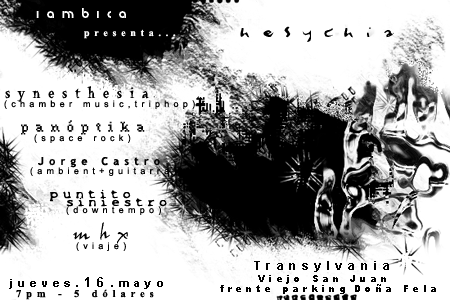
<style>
.page{position:relative;width:450px;height:300px;background:#ffffff}
.page>*{position:absolute;margin:0}
.t1{font:15px "BabyFace";letter-spacing:0.475em;color:#ffffff}
.t2{font:10px "TimesNewRomanPS-BoldMT";letter-spacing:0.475em;color:#ffffff}
.t3{font:24px "EnyaPlain";letter-spacing:0.475em;color:#010101}
.t4{font:16px "LaBambaLetPlain";letter-spacing:0.475em;color:#000000}
.t5{font:9px "ArialMT";letter-spacing:0.475em;color:#000000}
.t6{font:14px "NeedlePointSew-Plain-Regular";letter-spacing:0.475em;color:#000000}
.t7{font:11px "TrebuchetMS-Bold";letter-spacing:0.475em;color:#000000}
.t8{font:11.2px "X-Files-Regular";letter-spacing:0.475em;color:#000000}
.t9{font:19.6px "JohnHandyLetPlain";letter-spacing:0.475em;color:#000000}
.t10{font:12px "Arial-BoldMT";letter-spacing:0.475em;color:#010101}
.t11{font:11px "Arial-BoldMT";letter-spacing:0.475em;color:#010101}
.t12{font:13px "Arial-BoldMT";letter-spacing:0.475em;color:#010101}
.t13{font:9px "Arial-Black";letter-spacing:0.475em;color:#000000}
.t14{font:10.4px "TimesNewRomanPS-BoldMT";letter-spacing:0.475em;color:#010101}
.t15{font:9px "Arial-Black";letter-spacing:0.475em;color:#010101}
</style>
<div class="page">
<p class="t1" style="left:36px;top:8px;width:90px;height:10px">iambica</p>
<p class="t2" style="left:84px;top:29px;width:92px;height:10px">presenta...</p>
<p class="t3" style="left:240px;top:26px;width:154px;height:16px">hesychia</p>
<p class="t4" style="left:5px;top:86px;width:144px;height:16px">synesthesia</p>
<p class="t5" style="left:4px;top:100px;width:191px;height:9px">(chamber music,triphop)</p>
<p class="t6" style="left:21px;top:120px;width:124px;height:15px">panóptika</p>
<p class="t5" style="left:34px;top:134px;width:97px;height:9px">(space rock)</p>
<p class="t7" style="left:38px;top:157px;width:122px;height:11px">Jorge Castro</p>
<p class="t5" style="left:30px;top:167px;width:147px;height:9px">(ambient+guitarra)</p>
<p class="t8" style="left:49px;top:189px;width:82px;height:13px">puntito</p>
<p class="t8" style="left:66px;top:197px;width:101px;height:10px">siniestro</p>
<p class="t5" style="left:66px;top:206px;width:95px;height:9px">(downtempo)</p>
<p class="t9" style="left:73px;top:222px;width:55px;height:22px">mhx</p>
<p class="t5" style="left:76px;top:242px;width:50px;height:9px">(viaje)</p>
<p class="t10" style="left:254px;top:261px;width:135px;height:11px">Transylvania</p>
<p class="t11" style="left:9px;top:277px;width:154px;height:12px">jueves.<span class="t12">16</span>.mayo</p>
<p class="t13" style="left:258px;top:275px;width:128px;height:9px">Viejo San Juan</p>
<p class="t14" style="left:16px;top:289px;width:138px;height:11px">7pm - 5 dólares</p>
<p class="t15" style="left:220px;top:285px;width:125px;height:9px">frente parking</p>
<p class="t15" style="left:355px;top:284px;width:81px;height:8px">Doña Fela</p>
</div>
